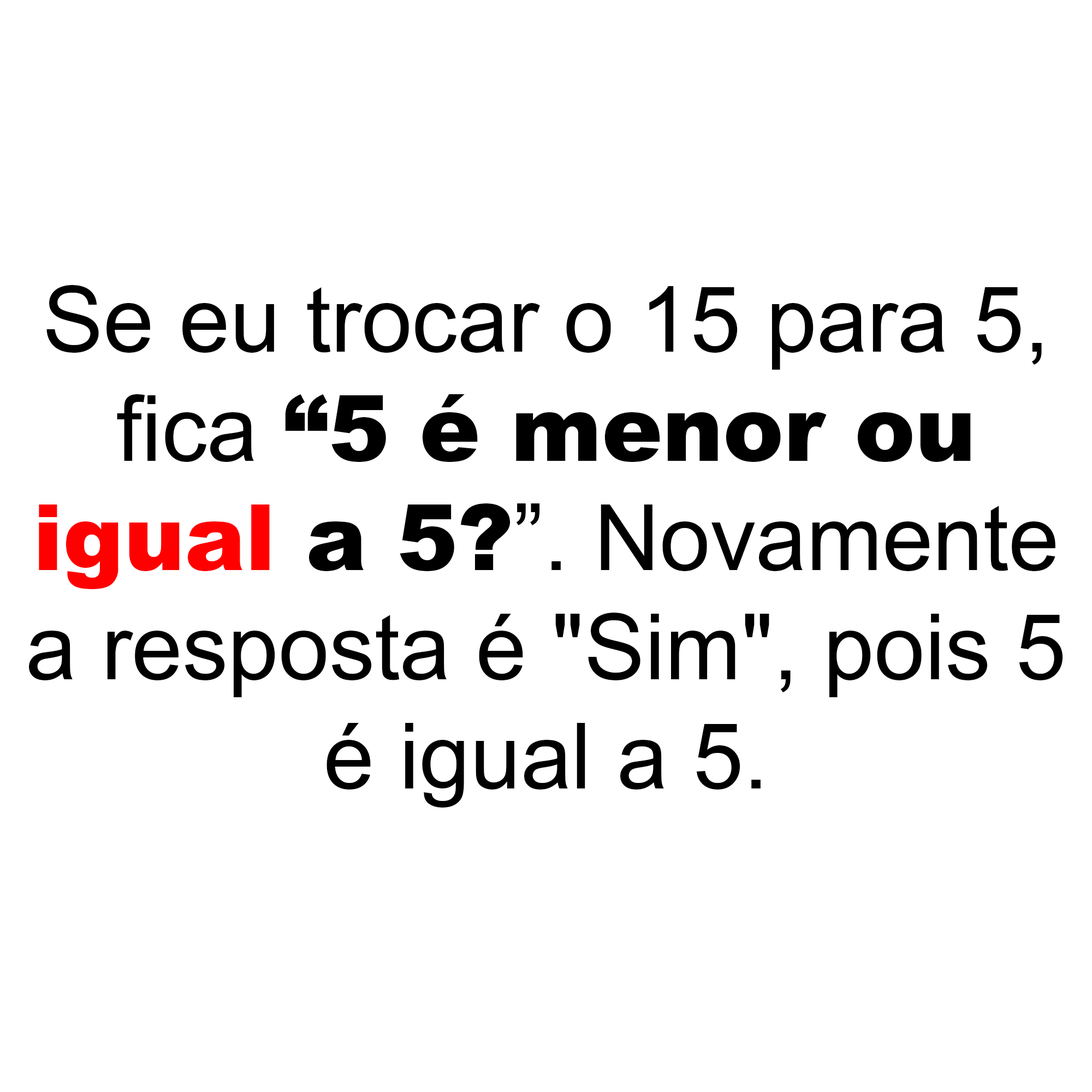
<style>
.page{position:relative;width:1092px;height:1092px;background:#ffffff}
.page>*{position:absolute;margin:0}
.t1{font:91px "ArialMT";color:#000000}
.t2{font:91px "Arial-Black";color:#000000}
.t3{font:91px "Arial-Black";color:#ff0000}
</style>
<div class="page">
<p class="t1" style="left:29px;top:285px;width:1034px;height:523px;text-align:center">Se eu trocar o 15 para 5,<br>fica <span class="t2">“5 é menor ou<br></span><span class="t3">igual</span><span class="t2"> a 5?</span>”. Novamente<br>a resposta é "Sim", pois 5<br>é igual a 5.</p>
</div>
